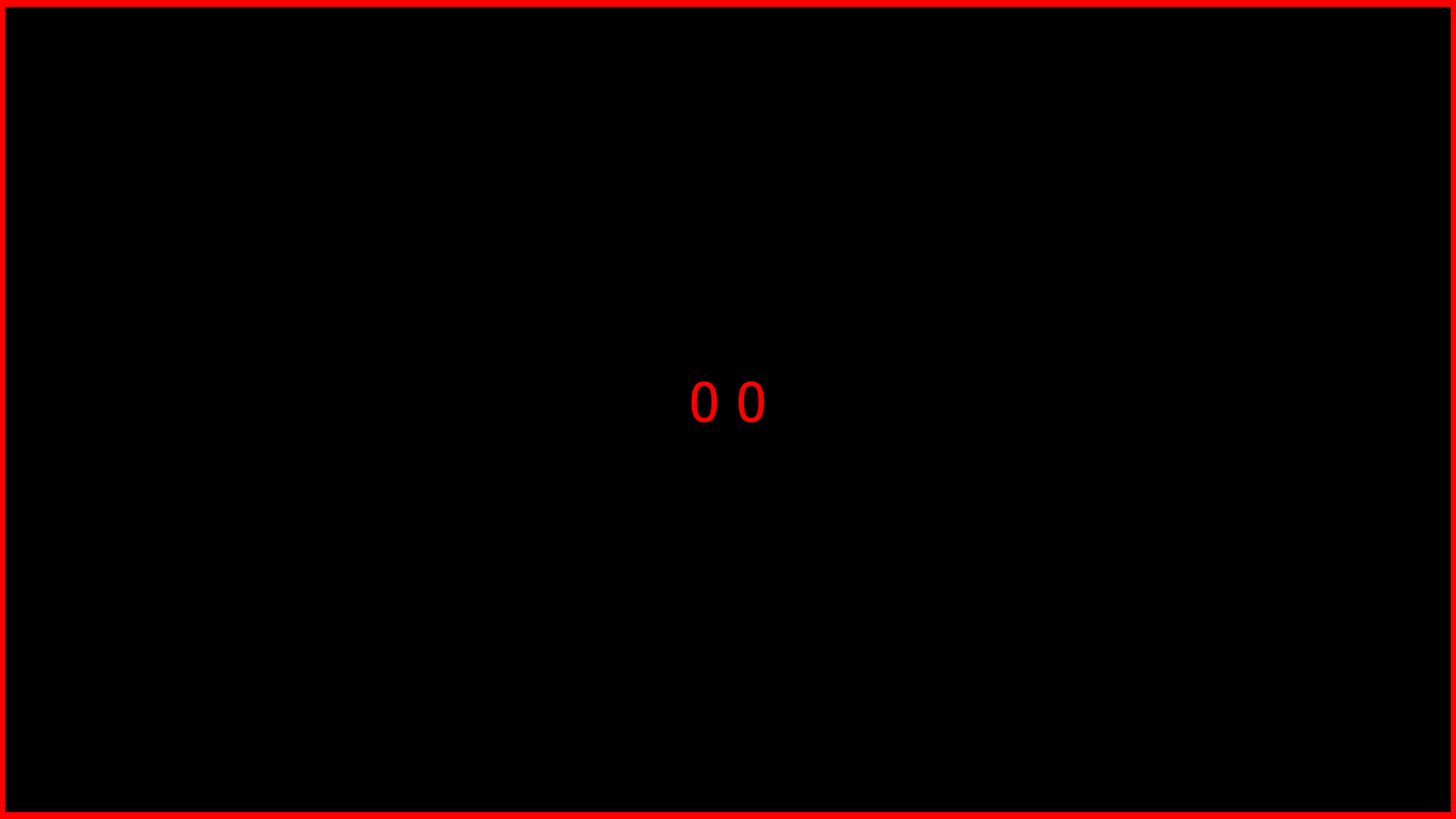
<style>
.page{position:relative;width:1456px;height:819px;background:#000000}
.page>*{position:absolute;margin:0}
.t1{font:54.6px "Tahoma";color:#ff0000}
</style>
<div class="page">
<p class="t1" style="left:691px;top:381px;width:73px;height:41px">0 0</p>
</div>
